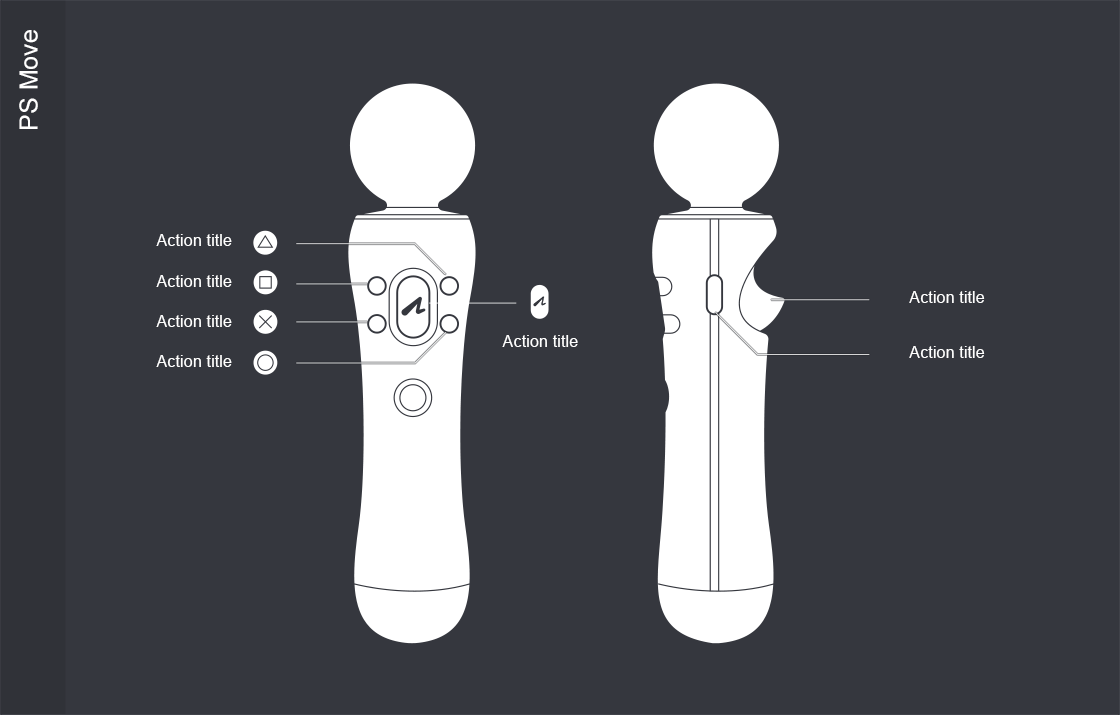
<style>
.page{position:relative;width:1120px;height:715px;background:#35373e}
.page>*{position:absolute;margin:0}
.t1{font:25px "ArialMT";color:#ffffff}
.t2{font:16.4px "ArialMT";color:#ffffff}
</style>
<div class="page">
<p class="t1" style="left:19px;top:30px;width:19px;height:99px;rotate:-90deg">PS Move</p>
<p class="t2" style="left:156px;top:234px;width:76px;height:12px">Action title</p>
<p class="t2" style="left:156px;top:275px;width:76px;height:12px">Action title</p>
<p class="t2" style="left:909px;top:291px;width:76px;height:12px">Action title</p>
<p class="t2" style="left:156px;top:315px;width:76px;height:12px">Action title</p>
<p class="t2" style="left:502px;top:335px;width:76px;height:12px">Action title</p>
<p class="t2" style="left:909px;top:346px;width:76px;height:12px">Action title</p>
<p class="t2" style="left:156px;top:355px;width:76px;height:12px">Action title</p>
</div>
